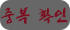
<style>
.page{position:relative;width:70px;height:30px;background:#676767}
.page>*{position:absolute;margin:0}
.t1{font:18px "JShinYeongBok-Regular";color:#7b1022}
</style>
<div class="page">
<p class="t1" style="left:1px;top:7px;width:67px;height:18px">중복 확인</p>
</div>
